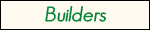
<style>
.page{position:relative;width:150px;height:30px;background:#fffaf0}
.page>*{position:absolute;margin:0}
.t1{font:20px "GeosansLight-Oblique";color:#008135;font-weight:bold}
</style>
<div class="page">
<p class="t1" style="left:45px;top:6px;width:61px;height:16px">Builders</p>
</div>
